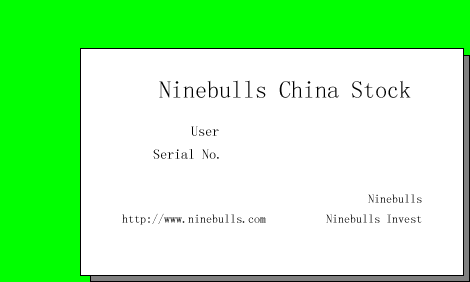
<style>
.page{position:relative;width:470px;height:282px;background:#ffffff}
.page>*{position:absolute;margin:0}
.t1{font:24px "SimSun";color:#000000}
.t2{font:14px "SimSun";color:#000000}
.t3{font:12px "SimSun"}
</style>
<div class="page">
<p class="t1" style="left:159px;top:80px;width:252px;height:18px">Ninebulls China Stock</p>
<p class="t2" style="left:191px;top:126px;width:28px;height:10px">User</p>
<p class="t2" style="left:153px;top:149px;width:66px;height:10px">Serial No.</p>
<p class="t3" style="left:368px;top:194px;width:54px;height:9px">Ninebulls</p>
<p class="t3" style="left:122px;top:213px;width:300px;height:12px">http://www.ninebulls.com          Ninebulls Invest</p>
</div>
